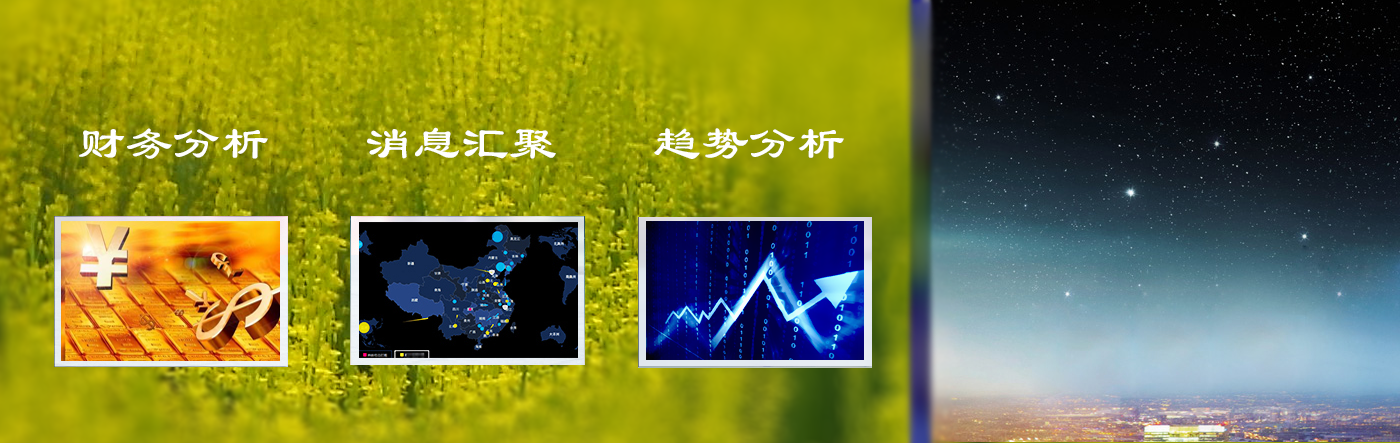
<style>
.page{position:relative;width:1400px;height:443px}
.page>*{position:absolute;margin:0}
.t1{font:48px "LiSu";color:#fffffe}
</style>
<div class="page">
<p class="t1" style="left:79px;top:127px;width:765px;height:32px">财务分析    消息汇聚    趋势分析</p>
</div>
